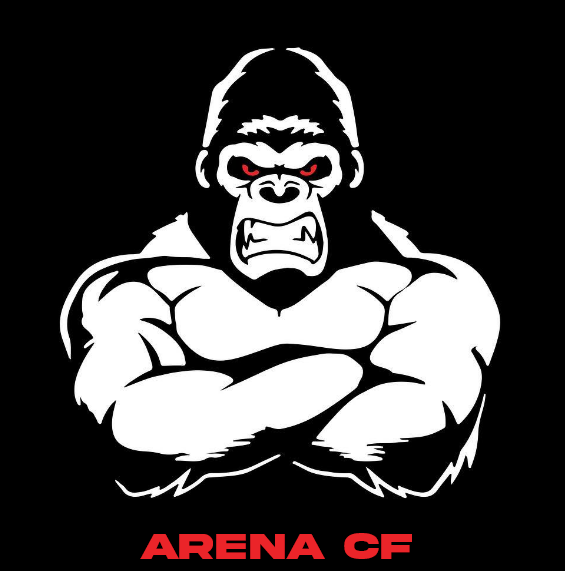
<style>
.page{position:relative;width:565px;height:571px;background:#000000}
.page>*{position:absolute;margin:0}
.t1{font:38.3px "AkiraExpanded-SuperBold";color:#eb2429}
</style>
<div class="page">
<p class="t1" style="left:140px;top:533px;width:272px;height:26px">ARENA CF</p>
</div>
